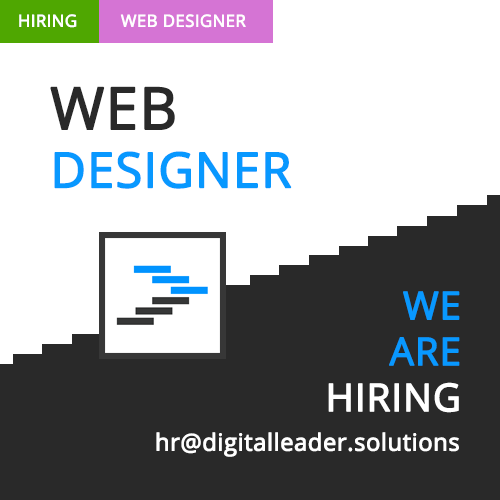
<style>
.page{position:relative;width:500px;height:500px;background:#ffffff}
.page>*{position:absolute;margin:0}
.t1{font:16.7px "OpenSans";color:#ffffff;text-transform:uppercase;font-weight:bold}
.t2{font:48.6px "OpenSans";color:#0898ff;text-transform:uppercase;font-weight:bold}
.t3{font:58px "OpenSans";color:#292929;text-transform:uppercase;font-weight:bold}
.t4{font:38.3px "OpenSans";color:#0898ff;text-transform:uppercase;font-weight:bold}
.t5{font:38.3px "OpenSans";color:#ffffff;text-transform:uppercase;font-weight:bold}
.t6{font:23.6px "OpenSans";color:#ffffff;font-weight:bold}
</style>
<div class="page">
<p class="t1" style="left:19px;top:14px;width:58px;height:14px">hiring</p>
<p class="t1" style="left:120px;top:14px;width:126px;height:14px">web designer</p>
<p class="t2" style="left:50px;top:86px;width:242px;height:103px"><span class="t3">WEB<br></span>Designer</p>
<p class="t4" style="left:328px;top:291px;width:132px;height:122px;text-align:right">We<br>are<br><span class="t5">hiring</span></p>
<p class="t6" style="left:156px;top:432px;width:303px;height:25px">hr@digitalleader.solutions</p>
</div>
